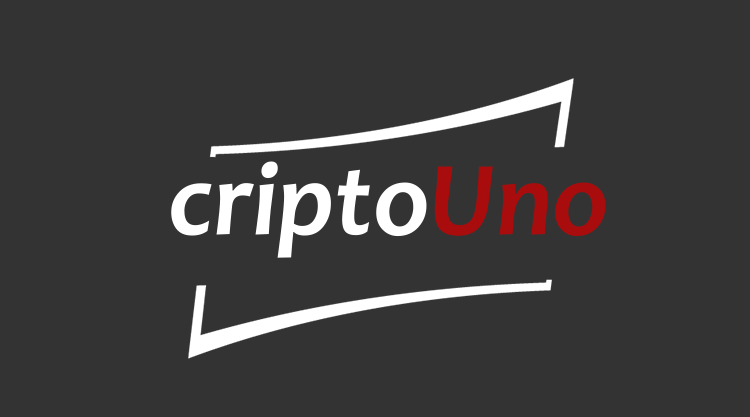
<style>
.page{position:relative;width:750px;height:417px;background:#333333}
.page>*{position:absolute;margin:0}
.t1{font:105.8px "Candara-BoldItalic";color:#ffffff}
.t2{font:105.8px "Candara-BoldItalic";color:#a80c0c}
</style>
<div class="page">
<p class="t1" style="left:171px;top:161px;width:256px;height:97px">cripto</p>
<p class="t2" style="left:434px;top:166px;width:172px;height:71px">Uno</p>
</div>
